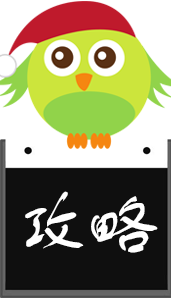
<style>
.page{position:relative;width:171px;height:298px;background:#0f0f0f}
.page>*{position:absolute;margin:0}
.t1{font:72px "FZSTK--GBK1-0";color:#ffffff}
</style>
<div class="page">
<p class="t1" style="left:25px;top:191px;width:133px;height:62px">攻略</p>
</div>
